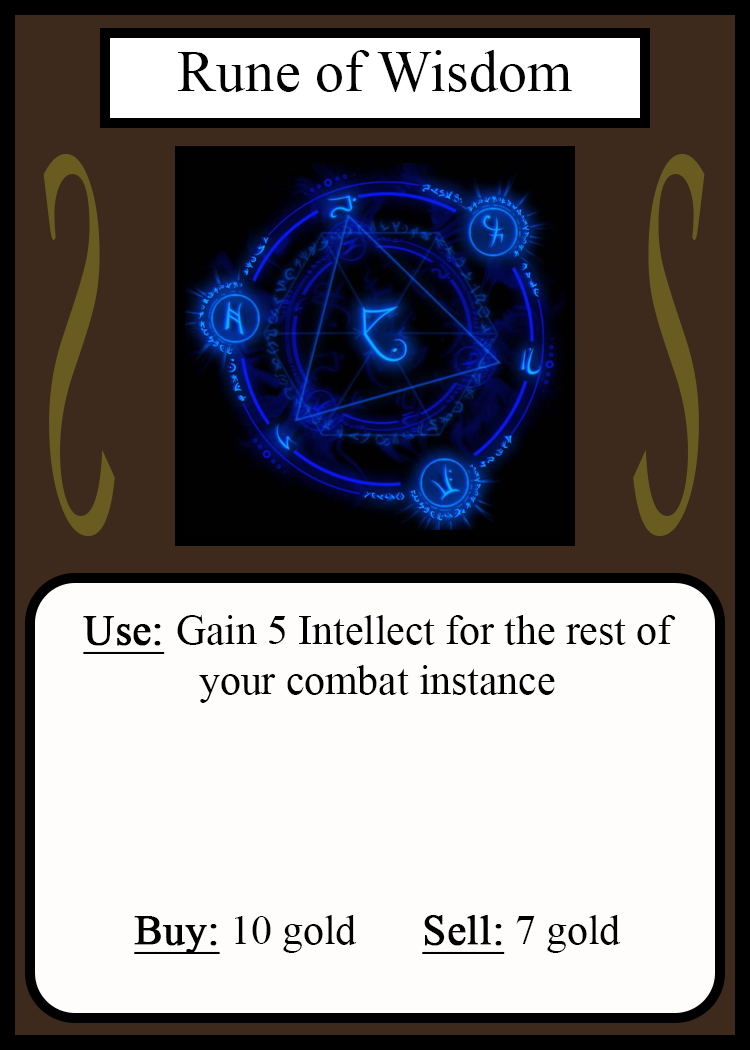
<style>
.page{position:relative;width:750px;height:1050px;background:#fffcfc}
.page>*{position:absolute;margin:0}
.t1{font:58.3px "TimesNewRomanPSMT";color:#010101}
.t2{font:548.5px "Apple-Chancery";color:#6a5c21;scale:0.27 1}
.t3{font:548.2px "Apple-Chancery";color:#6a5c21;scale:0.27 1}
.t4{font:41.7px "TimesNewRomanPSMT";color:#000000}
.t5{font:41.7px "TimesNewRomanPSMT";color:#000000;font-weight:bold;text-decoration:underline}
</style>
<div class="page">
<p class="t1" style="left:178px;top:50px;width:394px;height:42px">Rune of Wisdom</p>
<p class="t2" style="left:43px;top:154px;width:72px;height:382px;rotate:180deg">S</p>
<p class="t3" style="left:633px;top:154px;width:72px;height:382px">S</p>
<p class="t4" style="left:83px;top:615px;width:593px;height:339px;text-align:center"><span class="t5">Use: </span>Gain 5 Intellect for the rest of<br>your combat instance<br><br><br><br><br><span class="t5">Buy:</span> 10 gold   <span class="t5">Sell:</span> 7 gold</p>
</div>
